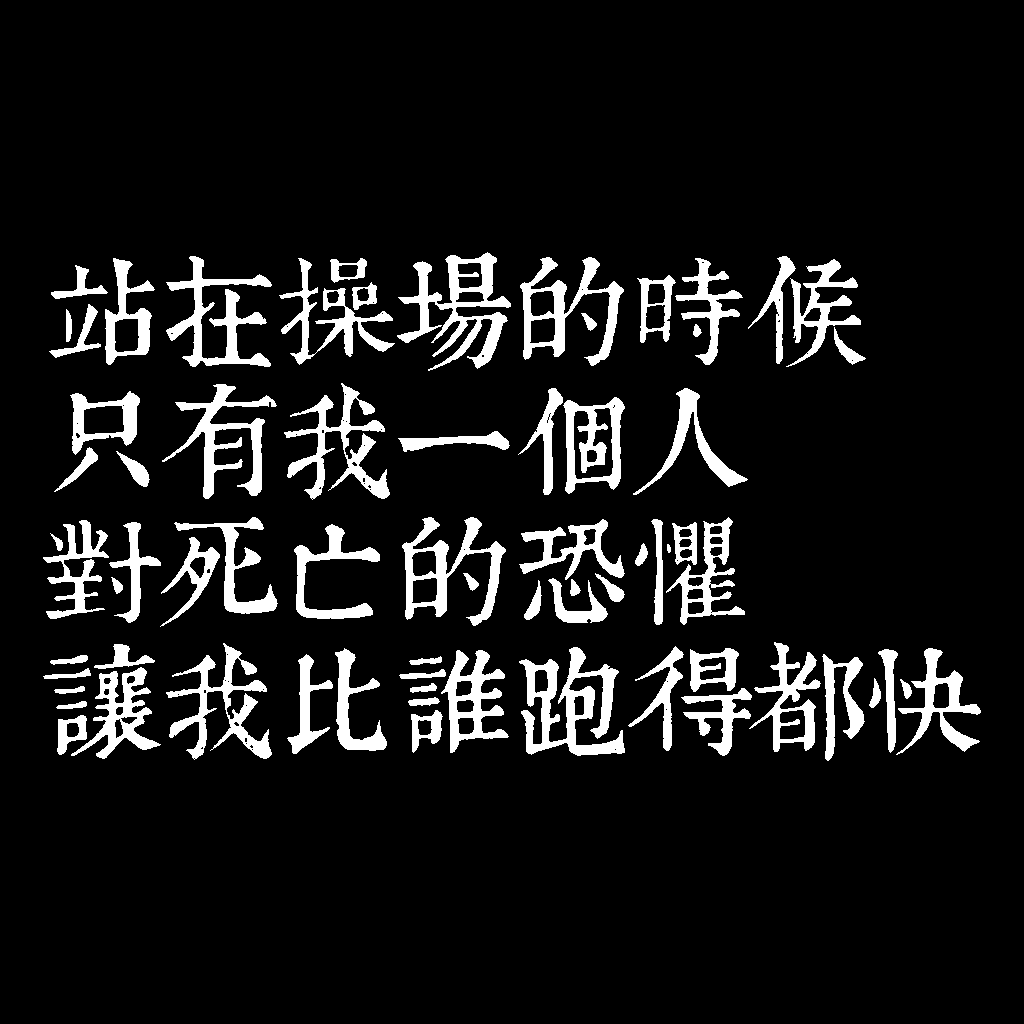
<style>
.page{position:relative;width:1024px;height:1024px;background:#000000}
.page>*{position:absolute;margin:0}
.t1{font:120px/130px "TpldKhangXiDictTrial";letter-spacing:-0.02em;color:#ffffff}
</style>
<div class="page">
<p class="t1" style="left:43px;top:252px;width:938px;height:509px">站在操場的時候<br>只有我一個人<br>對死亡的恐懼<br>讓我比誰跑得都快</p>
</div>
